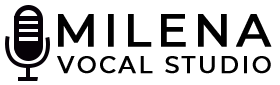
<style>
.page{position:relative;width:280px;height:85px;background:#ffffff}
.page>*{position:absolute;margin:0}
.t1{font:46.4px "Montserrat-Medium";letter-spacing:0.095em;color:#000000;font-weight:bold}
.t2{font:23.3px "Montserrat-Medium";letter-spacing:0.095em;color:#000000;font-weight:bold}
</style>
<div class="page">
<p class="t1" style="left:58px;top:14px;width:214px;height:33px">MILENA</p>
<p class="t2" style="left:57px;top:56px;width:214px;height:18px">VOCAL STUDIO</p>
</div>
